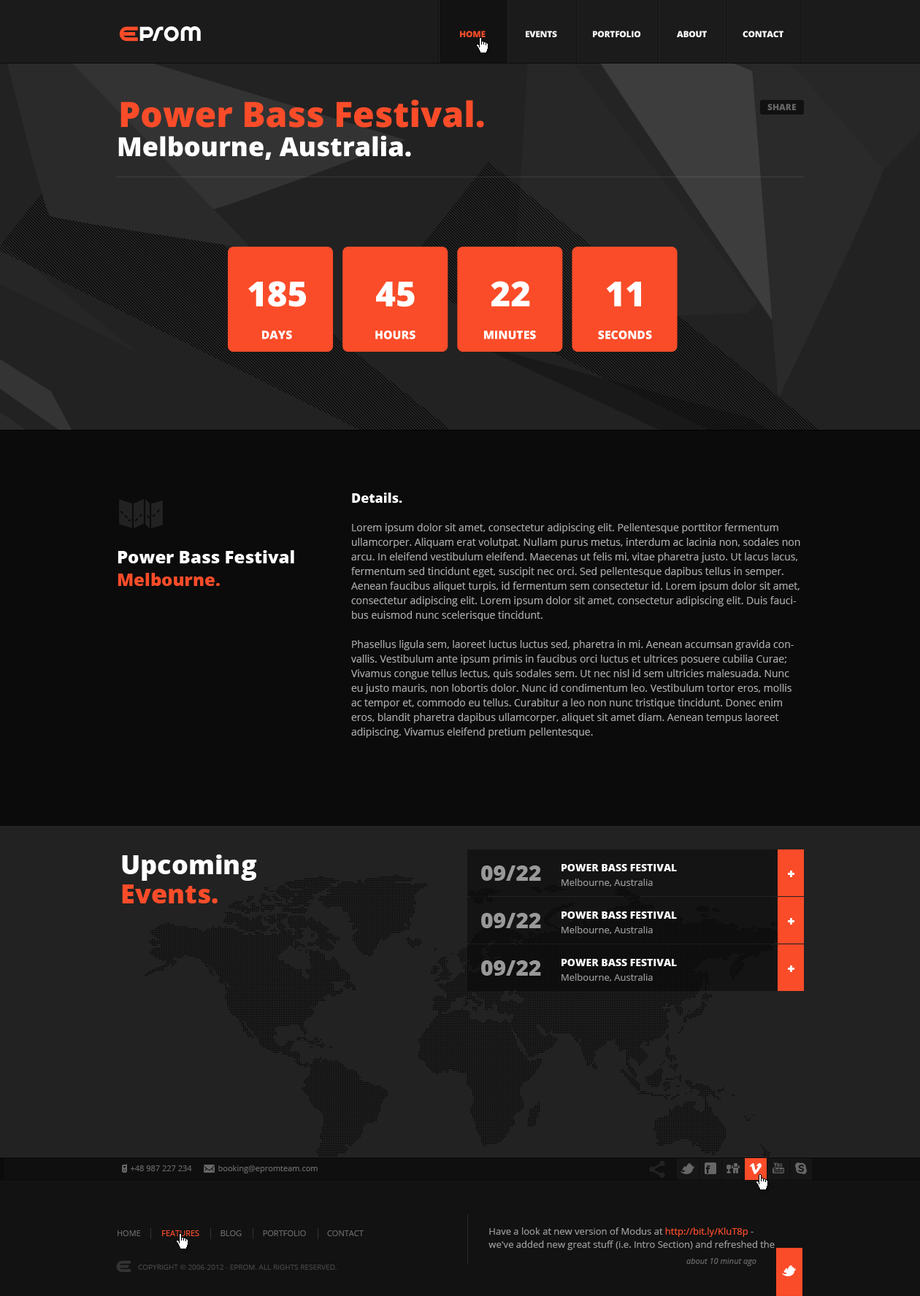
<style>
.page{position:relative;width:920px;height:1296px;background:#0b0b0b}
.page>*{position:absolute;margin:0}
.t1{font:22.4px "SpinCycleOT";letter-spacing:0.025em;color:#ffffff}
.t2{font:8.8px "OpenSans-Extrabold";letter-spacing:-0.025em;color:#fa4c29;text-transform:uppercase}
.t3{font:8.8px "OpenSans-Extrabold";letter-spacing:-0.025em;color:#ffffff;text-transform:uppercase}
.t4{font:35px "OpenSans-Extrabold";color:#fa4c29}
.t5{font:8.8px "OpenSans-Extrabold";color:#666666}
.t6{font:26.3px "OpenSans-Extrabold";color:#ffffff}
.t7{font:34.4px "OpenSans-Extrabold";color:#ffffff}
.t8{font:11.5px "OpenSans-Extrabold";color:#ffffff}
.t9{font:13.1px "OpenSans-Extrabold";color:#ffffff}
.t10{font:10.2px/14.6px "OpenSans";color:#aaaaaa}
.t11{font:17.5px "OpenSans-Extrabold";color:#ffffff}
.t12{font:17.5px "OpenSans-Extrabold";color:#fa4c29}
.t13{font:26.3px/29.2px "OpenSans-Extrabold";color:#ffffff}
.t14{font:26.3px/29.2px "OpenSans-Extrabold";color:#fa4c29}
.t15{font:21.9px "OpenSans-Extrabold";color:#999999}
.t16{font:10.2px "OpenSans-Extrabold";color:#ffffff}
.t17{font:9.5px "OpenSans";color:#999999}
.t18{font:8px "OpenSans";color:#666666}
.t19{font:9.5px/13.1px "OpenSans";color:#999999}
.t20{font:9.5px/13.1px "OpenSans";color:#fa4c29}
.t21{font:8px "OpenSans";color:#666666;text-transform:uppercase}
.t22{font:8px "OpenSans";color:#fa4c29;text-transform:uppercase}
.t23{font:7.3px "OpenSans";color:#444444;text-transform:uppercase}
.t24{font:8px "OpenSans-Italic";color:#666666}
</style>
<div class="page">
<p class="t1" style="left:139px;top:26px;width:62px;height:16px">prom</p>
<p class="t2" style="left:460px;top:31px;width:25px;height:6px">Home</p>
<p class="t3" style="left:526px;top:31px;width:31px;height:6px">EVENTS</p>
<p class="t3" style="left:593px;top:31px;width:48px;height:6px">PORTFOLIO</p>
<p class="t3" style="left:677px;top:31px;width:30px;height:6px">ABOUT</p>
<p class="t3" style="left:742px;top:31px;width:41px;height:6px">Contact</p>
<p class="t4" style="left:120px;top:99px;width:364px;height:29px">Power Bass Festival.</p>
<p class="t5" style="left:767px;top:104px;width:29px;height:6px">SHARE</p>
<p class="t6" style="left:118px;top:136px;width:293px;height:24px">Melbourne, Australia.</p>
<p class="t7" style="left:248px;top:281px;width:58px;height:26px">185</p>
<p class="t7" style="left:376px;top:282px;width:39px;height:25px">45</p>
<p class="t7" style="left:491px;top:281px;width:39px;height:26px">22</p>
<p class="t7" style="left:606px;top:282px;width:35px;height:25px">11</p>
<p class="t8" style="left:262px;top:331px;width:30px;height:8px">DAYS</p>
<p class="t8" style="left:375px;top:331px;width:40px;height:8px">HOURS</p>
<p class="t8" style="left:484px;top:331px;width:52px;height:8px">MINUTES</p>
<p class="t8" style="left:598px;top:331px;width:54px;height:8px">SECONDS</p>
<p class="t9" style="left:352px;top:493px;width:50px;height:10px">Details.</p>
<p class="t10" style="left:351px;top:523px;width:449px;height:215px">Lorem ipsum dolor sit amet, consectetur adipiscing elit. Pellentesque porttitor fermentum ullamcorper. Aliquam erat volutpat. Nullam purus metus, interdum ac lacinia non, sodales non arcu. In eleifend vestibulum eleifend. Maecenas ut felis mi, vitae pharetra justo. Ut lacus lacus, fermentum sed tincidunt eget, suscipit nec orci. Sed pellentesque dapibus tellus in semper. Aenean faucibus aliquet turpis, id fermentum sem consectetur id. Lorem ipsum dolor sit amet, consectetur adipiscing elit. Lorem ipsum dolor sit amet, consectetur adipiscing elit. Duis faucibus euismod nunc scelerisque tincidunt.<br><br>Phasellus ligula sem, laoreet luctus luctus sed, pharetra in mi. Aenean accumsan gravida convallis. Vestibulum ante ipsum primis in faucibus orci luctus et ultrices posuere cubilia Curae; Vivamus congue tellus lectus, quis sodales sem. Ut nec nisl id sem ultricies malesuada. Nunc eu justo mauris, non lobortis dolor. Nunc id condimentum leo. Vestibulum tortor eros, mollis ac tempor et, commodo eu tellus. Curabitur a leo non nunc tristique tincidunt. Donec enim eros, blandit pharetra dapibus ullamcorper, aliquet sit amet diam. Aenean tempus laoreet adipiscing. Vivamus eleifend pretium pellentesque.</p>
<p class="t11" style="left:118px;top:550px;width:176px;height:14px">Power Bass Festival</p>
<p class="t12" style="left:118px;top:573px;width:102px;height:13px">Melbourne.</p>
<p class="t13" style="left:122px;top:855px;width:135px;height:49px">Upcoming <span class="t14">Events.</span></p>
<p class="t15" style="left:481px;top:866px;width:60px;height:15px">09/22</p>
<p class="t16" style="left:561px;top:864px;width:116px;height:8px">POWER BASS FESTIVAL</p>
<p class="t17" style="left:561px;top:879px;width:92px;height:8px">Melbourne, Australia</p>
<p class="t15" style="left:481px;top:913px;width:60px;height:16px">09/22</p>
<p class="t16" style="left:561px;top:912px;width:116px;height:7px">POWER BASS FESTIVAL</p>
<p class="t17" style="left:561px;top:926px;width:92px;height:8px">Melbourne, Australia</p>
<p class="t15" style="left:481px;top:961px;width:60px;height:15px">09/22</p>
<p class="t16" style="left:561px;top:959px;width:116px;height:7px">POWER BASS FESTIVAL</p>
<p class="t17" style="left:561px;top:974px;width:92px;height:8px">Melbourne, Australia</p>
<p class="t18" style="left:130px;top:1166px;width:62px;height:6px">+48 987 227 234</p>
<p class="t18" style="left:218px;top:1166px;width:100px;height:8px">booking@epromteam.com</p>
<p class="t19" style="left:488px;top:1228px;width:287px;height:22px">Have a look at new version of Modus at <span class="t20">http://bit.ly/KluT8p</span> - we've added new great stuff (i.e. Intro Section) and refreshed the theme!</p>
<p class="t21" style="left:118px;top:1231px;width:246px;height:6px">Home          <span class="t22">Features </span>         Blog          Portfolio          Contact</p>
<p class="t23" style="left:138px;top:1265px;width:199px;height:5px">Copyright © 2006-2012 - EPROM. All rights reserved.</p>
<p class="t24" style="left:686px;top:1258px;width:70px;height:9px">about 10 minut ago</p>
</div>
